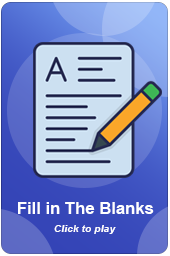
<style>
.page{position:relative;width:170px;height:256px}
.page>*{position:absolute;margin:0}
.t1{font:16.7px "Arial-BoldMT";color:#ffffff}
.t2{font:10.4px "Arial-BoldItalicMT";color:#ffffff}
</style>
<div class="page">
<p class="t1" style="left:18px;top:202px;width:136px;height:12px">Fill in The Blanks</p>
<p class="t2" style="left:54px;top:225px;width:62px;height:9px">Click to play</p>
</div>
